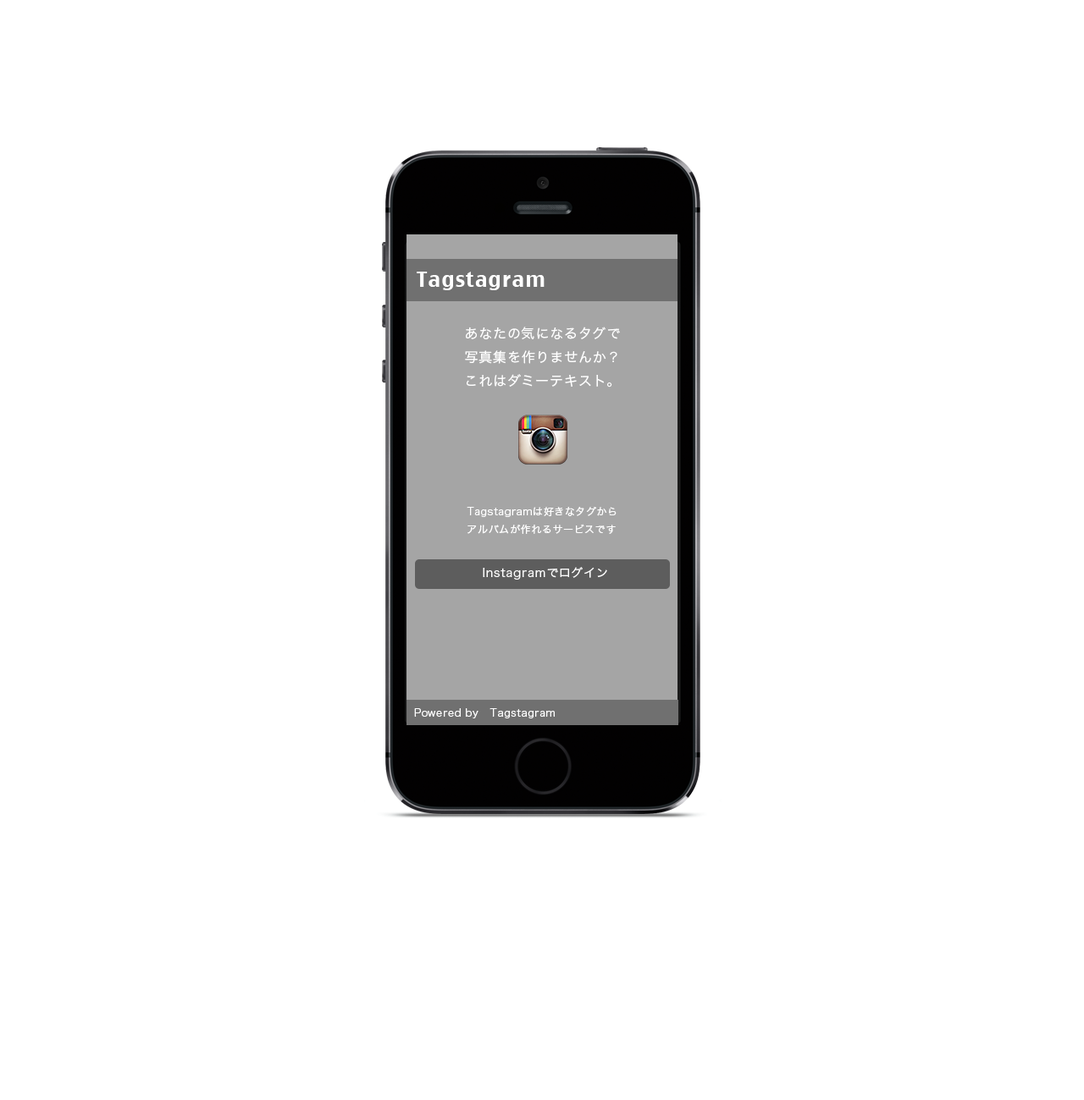
<style>
.page{position:relative;width:1084px;height:1100px;background:#ffffff}
.page>*{position:absolute;margin:0}
.t1{font:20.3px "CharcoalCY";letter-spacing:0.05em;color:#ffffff}
.t2{font:13.5px "HiraKakuPro-W3";letter-spacing:0.05em;color:#ffffff}
.t3{font:10.2px "HiraKakuPro-W3";letter-spacing:0.05em;color:#ffffff}
.t4{font:11.9px "HiraKakuPro-W3";letter-spacing:0.05em;color:#ffffff}
</style>
<div class="page">
<p class="t1" style="left:416px;top:272px;width:128px;height:18px">Tagstagram</p>
<p class="t2" style="left:465px;top:327px;width:155px;height:61px">あなたの気になるタグで<br>写真集を作りませんか？<br>これはダミーテキスト。</p>
<p class="t3" style="left:466px;top:507px;width:150px;height:27px">Tagstagramは好きなタグから<br>アルバムが作れるサービスです</p>
<p class="t4" style="left:483px;top:567px;width:124px;height:13px">Instagramでログイン</p>
<p class="t3" style="left:414px;top:709px;width:140px;height:10px">Powered by   Tagstagram</p>
</div>
